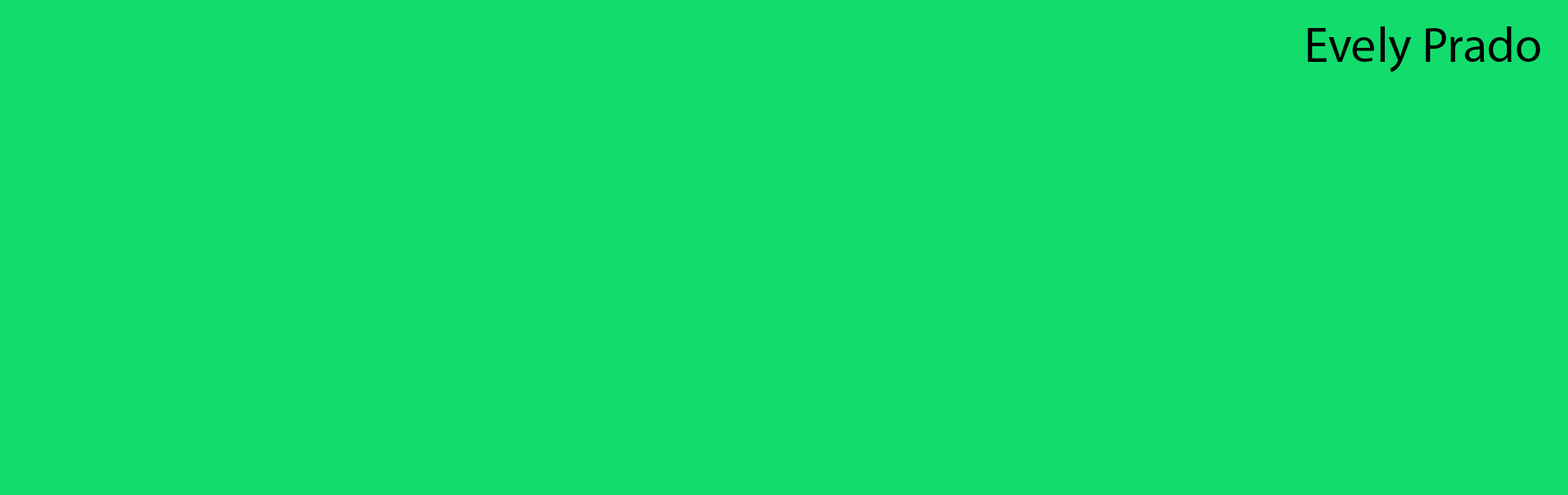
<style>
.page{position:relative;width:1568px;height:495px;background:#12dc6c}
.page>*{position:absolute;margin:0}
.t1{font:49.5px "MyriadPro-Regular";color:#000000}
</style>
<div class="page">
<p class="t1" style="left:1307px;top:26px;width:234px;height:47px">Evely Prado</p>
</div>
